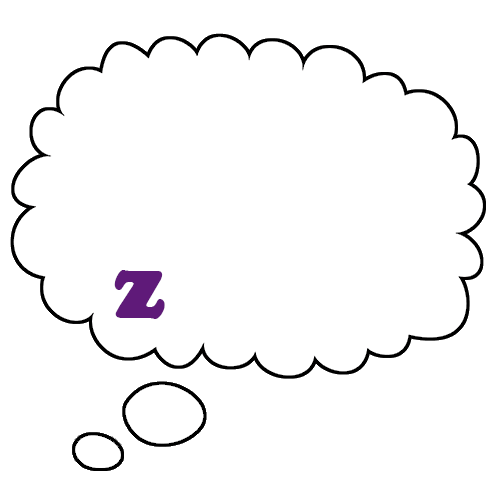
<style>
.page{position:relative;width:500px;height:500px;background:#ffffff}
.page>*{position:absolute;margin:0}
.t1{font:100px "CooperBlack";color:#5f1a79}
</style>
<div class="page">
<p class="t1" style="left:114px;top:270px;width:51px;height:49px">z</p>
</div>
